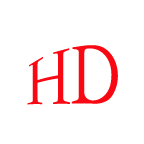
<style>
.page{position:relative;width:144px;height:144px;background:#ffffff}
.page>*{position:absolute;margin:0}
.t1{font:60px "STFangsong";color:#f80813}
</style>
<div class="page">
<p class="t1" style="left:27px;top:45px;width:91px;height:60px">HD</p>
</div>
